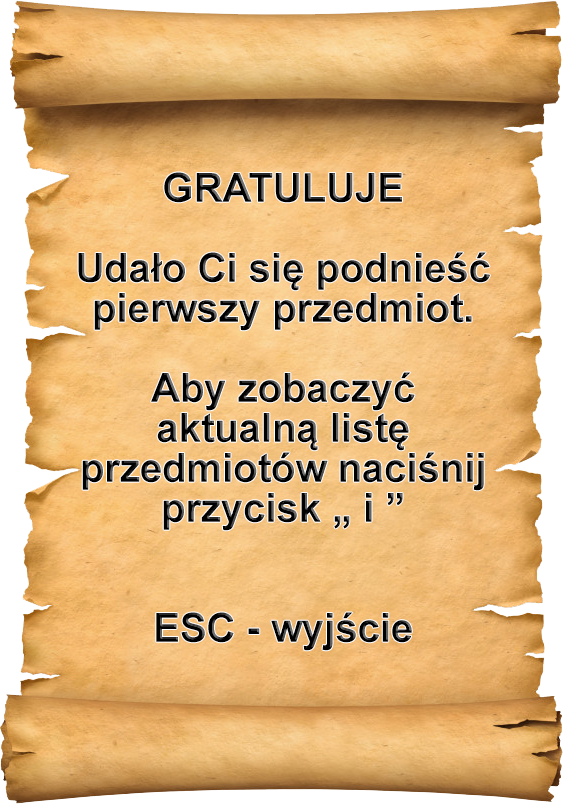
<style>
.page{position:relative;width:563px;height:804px}
.page>*{position:absolute;margin:0}
.t1{font:40px/40px "Arial-BoldMT"}
</style>
<div class="page">
<p class="t1" style="left:78px;top:172px;width:412px;height:479px;text-align:center">GRATULUJE<br><br>Udało Ci się podnieść pierwszy przedmiot.<br><br>Aby zobaczyć <br>aktualną listę <br>przedmiotów naciśnij  przycisk „ i ”<br><br><br>ESC - wyjście</p>
</div>
